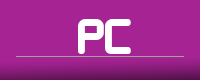
<style>
.page{position:relative;width:200px;height:80px;background:#a62393}
.page>*{position:absolute;margin:0}
.t1{font:12px "DesignerBlock";color:#ffffff}
</style>
<div class="page">
<p class="t1" style="left:78px;top:19px;width:53px;height:35px">PC</p>
</div>
